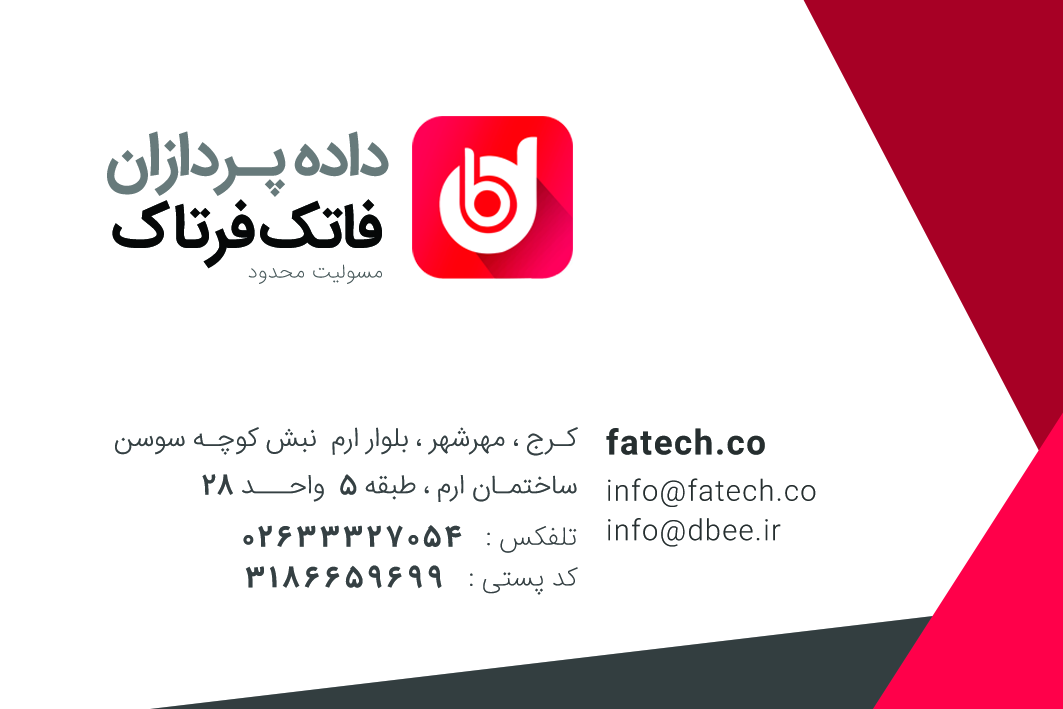
<style>
.page{position:relative;width:1063px;height:709px;background:#ffffff}
.page>*{position:absolute;margin:0}
.t1{font:61.9px/72.2px "IRANSans-Bold";letter-spacing:-0.03em;color:#677a7b}
.t2{font:61.9px/72.2px "IRANSans-Bold";letter-spacing:-0.03em;color:#060808}
.t3{font:21.1px "IRANSans-UltraLight";letter-spacing:0.01em;color:#4a5a5c}
.t4{font:27.5px/47.3px "IRANSans-Light";letter-spacing:-0.01em;color:#354042}
.t5{font:27.5px/47.3px "IRANSansFaNum-Medium";letter-spacing:-0.01em;color:#354042}
.t6{font:26.9px/46.6px "IRANSans-UltraLight";letter-spacing:0.05em;color:#252d2f}
.t7{font:30.4px/39.4px "IRANSansFaNum-Medium";letter-spacing:-0.01em;color:#252d2f}
.t8{font:32.3px/82.4px "IRANSans-Bold";letter-spacing:0.05em;color:#252d2f}
.t9{font:26.9px/39.4px "IRANSans-UltraLight";letter-spacing:0.05em;color:#252d2f}
.t10{font:27.5px "IRANSansFaNum-Bold";letter-spacing:0.13em;color:#354042}
.t11{font:27.5px "IRANSans-UltraLight";letter-spacing:-0.01em;color:#354042}
</style>
<div class="page">
<p class="t1" style="left:107px;top:131px;width:282px;height:138px;text-align:center">داده پـردازان<br><span class="t2">فاتک فرتاک</span></p>
<p class="t3" style="left:248px;top:264px;width:134px;height:20px">مسولیت محدود</p>
<p class="t4" style="left:115px;top:427px;width:463px;height:75px">کـرج ، مهرشهر ، بلوار ارم  نبش کوچـه سوسن  ساختمـان ارم ، طبقه <span class="t5">5</span>  واحـــد <span class="t5">28</span></p>
<p class="t6" style="left:606px;top:428px;width:210px;height:119px;text-align:right"><span class="t7"><br><br></span><span class="t8">fatech.co<br></span>info@fatech.co<br><span class="t9">info@dbee.ir</span></p>
<p class="t10" style="left:243px;top:525px;width:334px;height:28px"><span class="t11">تلفکس : </span>  02633327054</p>
<p class="t10" style="left:245px;top:565px;width:333px;height:30px"><span class="t11">کد پستی :   </span>3186659699</p>
</div>
